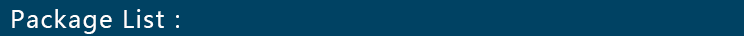
<style>
.page{position:relative;width:744px;height:37px;background:#004263}
.page>*{position:absolute;margin:0}
.t1{font:24px "MicrosoftYaHei";letter-spacing:0.05em;color:#ffffff}
</style>
<div class="page">
<p class="t1" style="left:12px;top:9px;width:167px;height:25px">Package List：</p>
</div>
